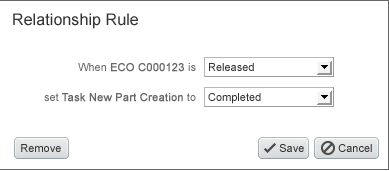
<style>
.page{position:relative;width:389px;height:171px;background:#ffffff}
.page>*{position:absolute;margin:0}
.t1{font:16px "ArialMT";letter-spacing:0.005em;color:#333333}
.t2{font:11px "ArialMT";color:#666666;font-weight:bold}
.t3{font:11px "ArialMT";color:#666666}
.t4{font:11px "ArialMT";color:#303030}
</style>
<div class="page">
<p class="t1" style="left:13px;top:13px;width:125px;height:16px">Relationship Rule</p>
<p class="t2" style="left:78px;top:63px;width:118px;height:9px"><span class="t3">When </span>ECO C000123 <span class="t3">is</span></p>
<p class="t4" style="left:209px;top:63px;width:45px;height:8px">Released</p>
<p class="t2" style="left:44px;top:93px;width:152px;height:9px"><span class="t3">set </span>Task New Part Creation<span class="t3"> to</span></p>
<p class="t4" style="left:208px;top:93px;width:53px;height:11px">Completed</p>
<p class="t4" style="left:21px;top:144px;width:40px;height:8px">Remove</p>
<p class="t4" style="left:279px;top:144px;width:25px;height:8px">Save</p>
<p class="t4" style="left:338px;top:144px;width:34px;height:8px">Cancel</p>
</div>
